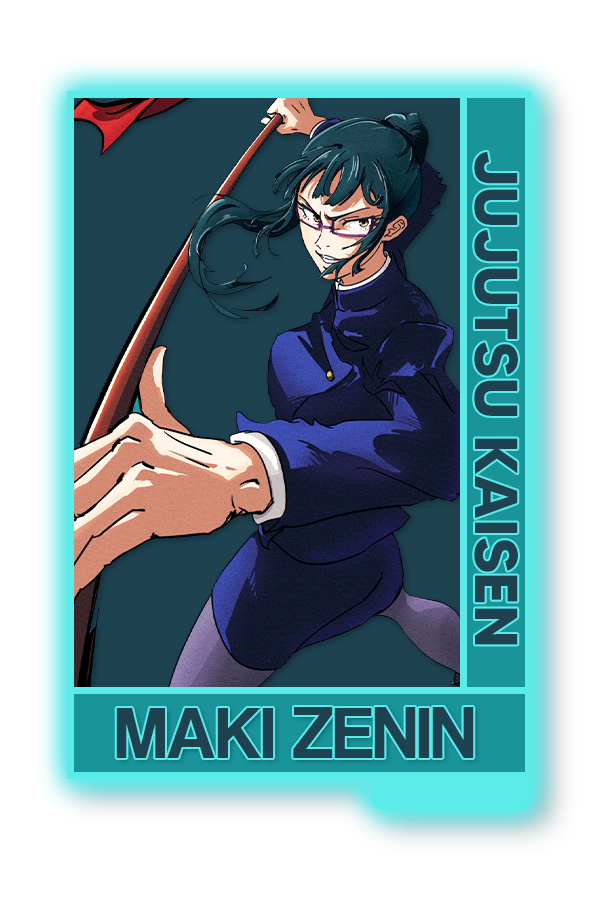
<style>
.page{position:relative;width:600px;height:900px;background:#ffffff}
.page>*{position:absolute;margin:0}
.t1{font:60.3px "MADETOMMY-Bold";color:#244244}
.t2{font:75px "CoolveticaRg-Regular";color:#244244}
</style>
<div class="page">
<p class="t1" style="left:474px;top:152px;width:44px;height:493px;rotate:90deg">JUJUTSU KAISEN</p>
<p class="t2" style="left:116px;top:707px;width:358px;height:51px">MAKI ZENIN</p>
</div>
